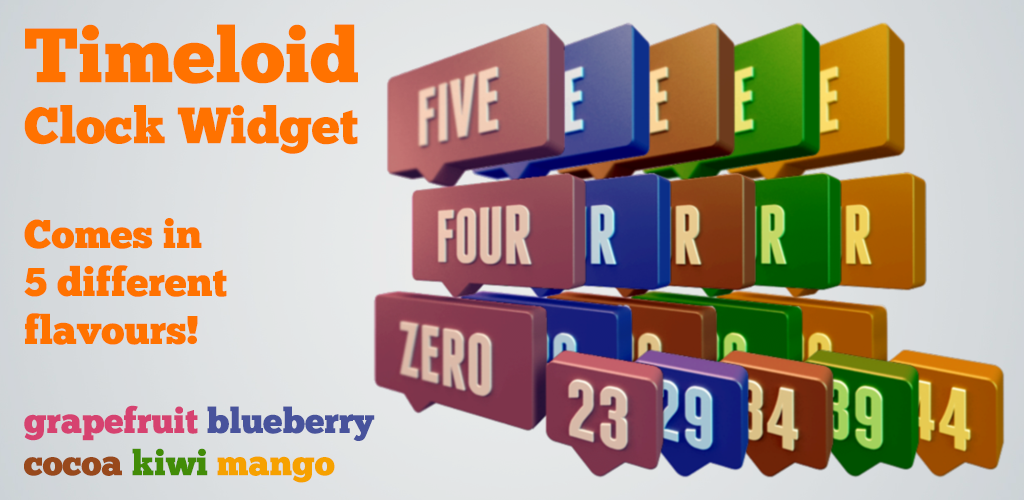
<style>
.page{position:relative;width:1024px;height:500px}
.page>*{position:absolute;margin:0}
.t1{font:50.8px "ChunkFive-Roman";color:#ff7200}
.t2{font:76.8px "ChunkFive-Roman";color:#ff7200}
.t3{font:40px "ChunkFive-Roman";color:#ff7200}
.t4{font:35.2px "ChunkFive-Roman";color:#d64270}
.t5{font:35.2px "ChunkFive-Roman";color:#48539c}
.t6{font:35.2px "ChunkFive-Roman";color:#98491c}
.t7{font:35.2px "ChunkFive-Roman";color:#428c07}
.t8{font:35.2px "ChunkFive-Roman";color:#f6a100}
</style>
<div class="page">
<p class="t1" style="left:24px;top:24px;width:334px;height:130px"><span class="t2">Timeloid<br></span>Clock Widget</p>
<p class="t3" style="left:24px;top:218px;width:203px;height:127px">Comes in<br>5 different<br>flavours!</p>
<p class="t4" style="left:24px;top:405px;width:351px;height:78px">grapefruit <span class="t5">blueberry<br></span><span class="t6">cocoa </span><span class="t7">kiwi </span><span class="t8">mango</span></p>
</div>
